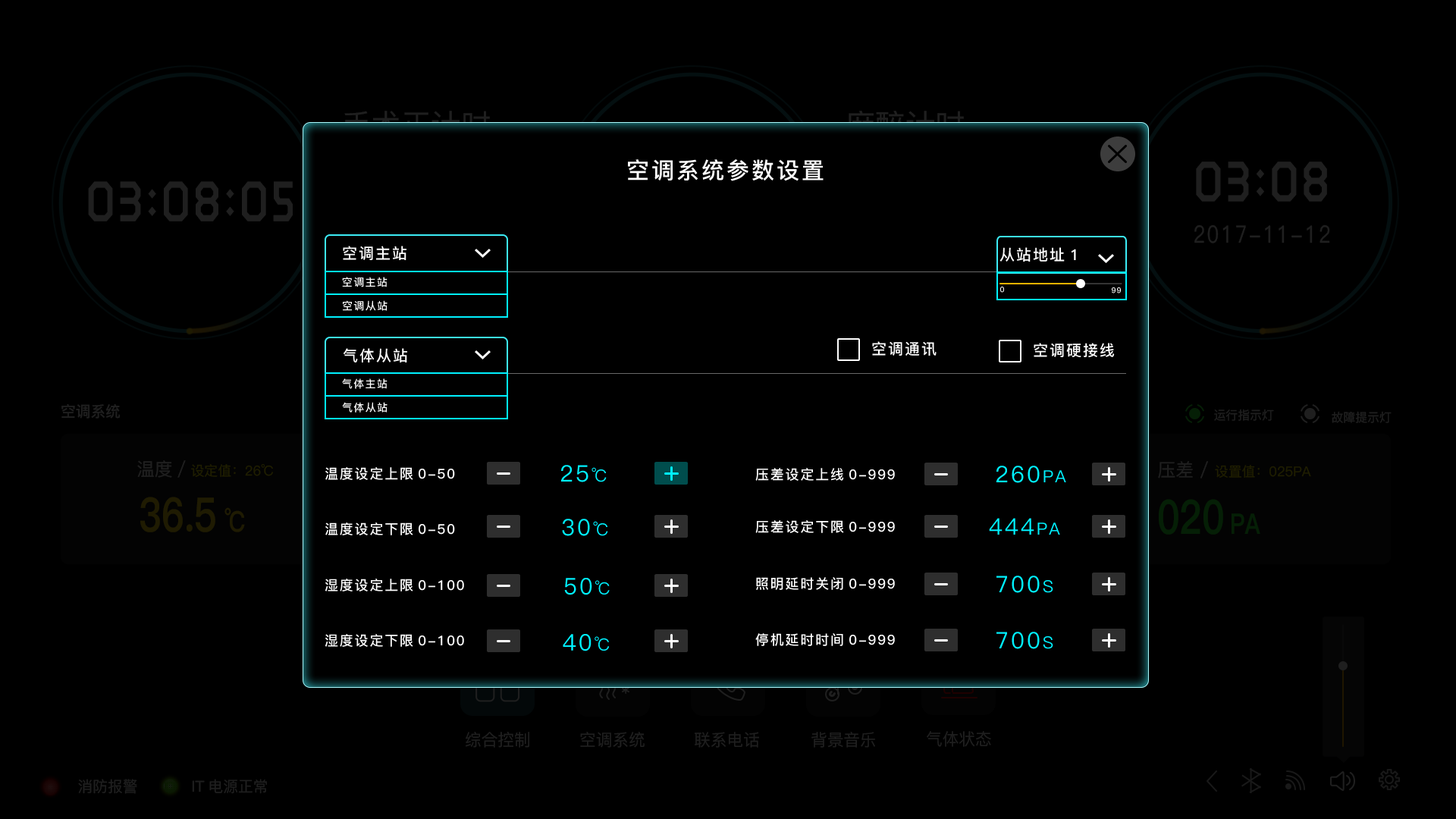
<style>
.page{position:relative;width:1456px;height:819px;background:#000000}
.page>*{position:absolute;margin:0}
.t1{font:22.7px "PingFang-SC-Bold";letter-spacing:0.1em;color:#ffffff}
.t2{font:15.2px "PingFang-SC-Bold";letter-spacing:0.1em;color:#ffffff}
.t3{font:10.6px "PingFang-SC-Bold";letter-spacing:0.1em;color:#ffffff}
.t4{font:7.6px "PingFang-SC-Bold";letter-spacing:0.1em;color:#ffffff}
.t5{font:13.6px "PingFang-SC-Bold";letter-spacing:0.1em;color:#ffffff}
.t6{font:22.7px "PingFang-SC-Medium";letter-spacing:0.1em;color:#00f1ff}
.t7{font:16.7px "PingFang-SC-Medium";letter-spacing:0.1em;color:#00f1ff}
</style>
<div class="page">
<p class="t1" style="left:628px;top:159px;width:196px;height:22px">空调系统参数设置</p>
<p class="t2" style="left:343px;top:246px;width:63px;height:14px">空调主站</p>
<p class="t2" style="left:999px;top:247px;width:77px;height:15px">从站地址1</p>
<p class="t3" style="left:342px;top:277px;width:46px;height:10px">空调主站</p>
<p class="t4" style="left:1000px;top:287px;width:4px;height:6px">0</p>
<p class="t4" style="left:1112px;top:287px;width:9px;height:6px">99</p>
<p class="t3" style="left:343px;top:300px;width:45px;height:11px">空调从站</p>
<p class="t2" style="left:872px;top:341px;width:65px;height:15px">空调通讯</p>
<p class="t2" style="left:343px;top:348px;width:64px;height:14px">气体从站</p>
<p class="t2" style="left:1034px;top:343px;width:81px;height:15px">空调硬接线</p>
<p class="t3" style="left:342px;top:378px;width:46px;height:11px">气体主站</p>
<p class="t3" style="left:342px;top:402px;width:46px;height:11px">气体从站</p>
<p class="t5" style="left:325px;top:467px;width:130px;height:13px">温度设定上限0-50</p>
<p class="t6" style="left:560px;top:465px;width:47px;height:17px">25<span class="t7">℃</span></p>
<p class="t5" style="left:755px;top:468px;width:140px;height:13px">压差设定上线0-999</p>
<p class="t6" style="left:996px;top:466px;width:70px;height:17px">260<span class="t7">PA</span></p>
<p class="t6" style="left:562px;top:519px;width:46px;height:17px">30<span class="t7">℃</span></p>
<p class="t5" style="left:755px;top:520px;width:140px;height:13px">压差设定下限0-999</p>
<p class="t6" style="left:989px;top:518px;width:71px;height:17px">444<span class="t7">PA</span></p>
<p class="t5" style="left:325px;top:522px;width:130px;height:13px">温度设定下限0-50</p>
<p class="t5" style="left:325px;top:579px;width:139px;height:12px">湿度设定上限0-100</p>
<p class="t6" style="left:564px;top:578px;width:46px;height:17px">50<span class="t7">℃</span></p>
<p class="t5" style="left:756px;top:577px;width:139px;height:13px">照明延时关闭0-999</p>
<p class="t6" style="left:996px;top:576px;width:57px;height:17px">700<span class="t7">S</span></p>
<p class="t5" style="left:325px;top:634px;width:139px;height:13px">湿度设定下限0-100</p>
<p class="t6" style="left:563px;top:634px;width:47px;height:17px">40<span class="t7">℃</span></p>
<p class="t5" style="left:755px;top:633px;width:140px;height:13px">停机延时时间0-999</p>
<p class="t6" style="left:996px;top:632px;width:57px;height:17px">700<span class="t7">S</span></p>
</div>
